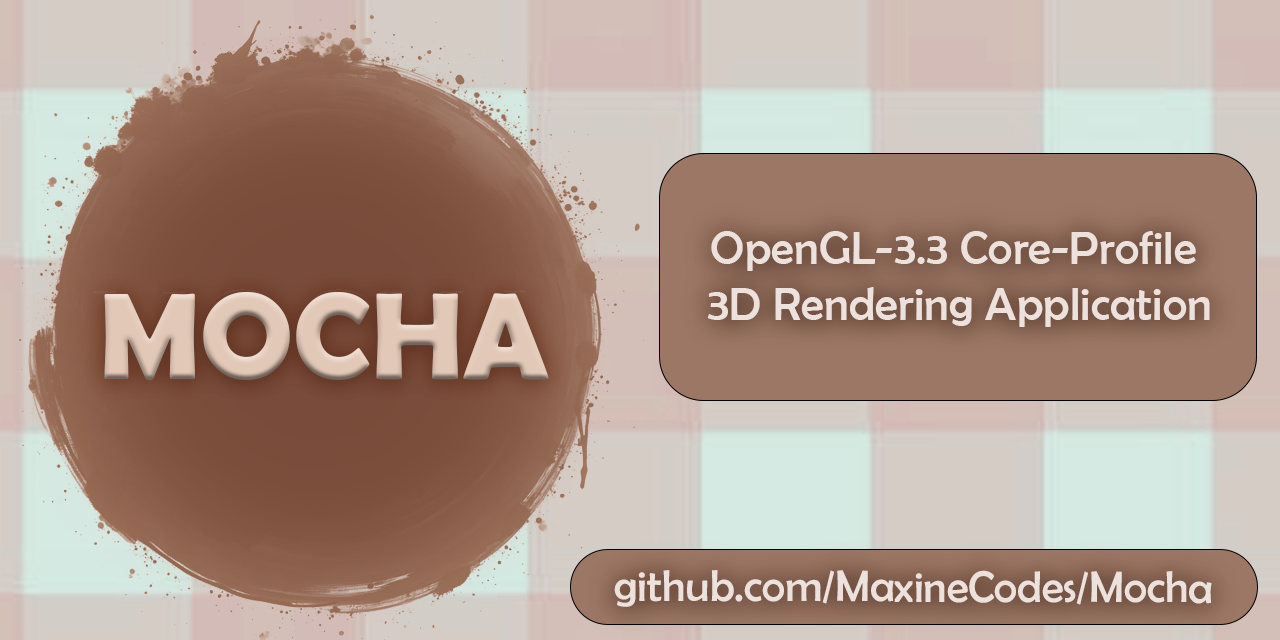
<style>
.page{position:relative;width:1280px;height:640px}
.page>*{position:absolute;margin:0}
.t1{font:47.3px "BerlinSansFB-Reg";color:#ece1dd}
.t2{font:106.6px "BerlinSansFBDemi-Bold";color:#e2c8b7}
.t3{font:44.4px "BerlinSansFB-Reg";color:#ece1dd}
</style>
<div class="page">
<p class="t1" style="left:707px;top:231px;width:503px;height:96px;text-align:center">OpenGL-3.3 Core-Profile <br>3D Rendering Application</p>
<p class="t2" style="left:104px;top:292px;width:445px;height:89px">MOCHA</p>
<p class="t3" style="left:614px;top:570px;width:598px;height:37px">github.com/MaxineCodes/Mocha</p>
</div>
